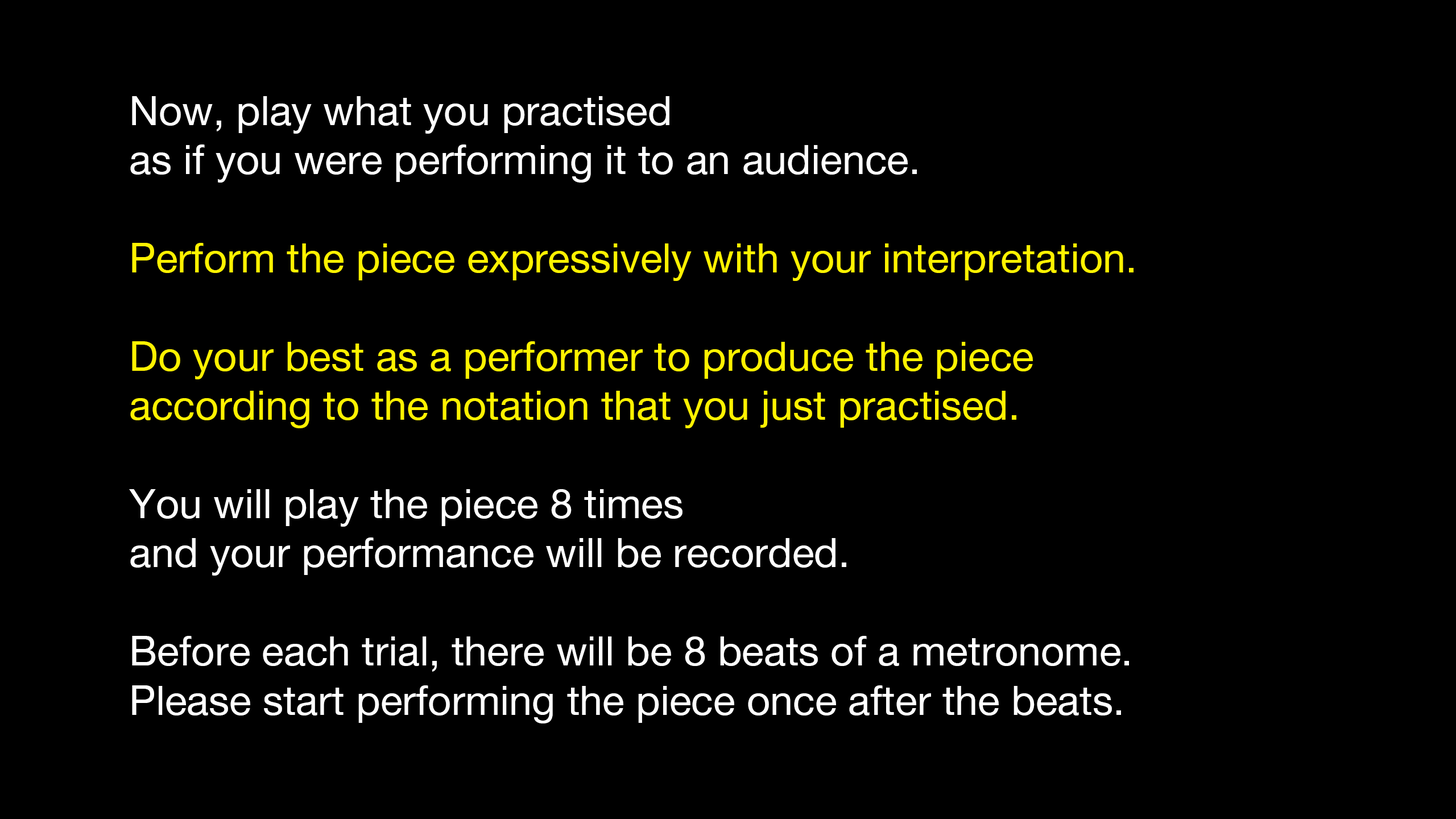
<style>
.page{position:relative;width:1456px;height:819px;background:#000000}
.page>*{position:absolute;margin:0}
.t1{font:40.9px "HelveticaNeue";color:#ffffff}
.t2{font:40.9px "HelveticaNeue";color:#fff200}
</style>
<div class="page">
<p class="t1" style="left:129px;top:96px;width:1005px;height:627px">Now, play what you practised<br>as if you were performing it to an audience.<br><br><span class="t2">Perform the piece expressively with your interpretation.<br><br>Do your best as a performer to produce the piece<br>according to the notation that you just practised.<br></span><br>You will play the piece 8 times<br>and your performance will be recorded.<br><br>Before each trial, there will be 8 beats of a metronome.<br>Please start performing the piece once after the beats.</p>
</div>
